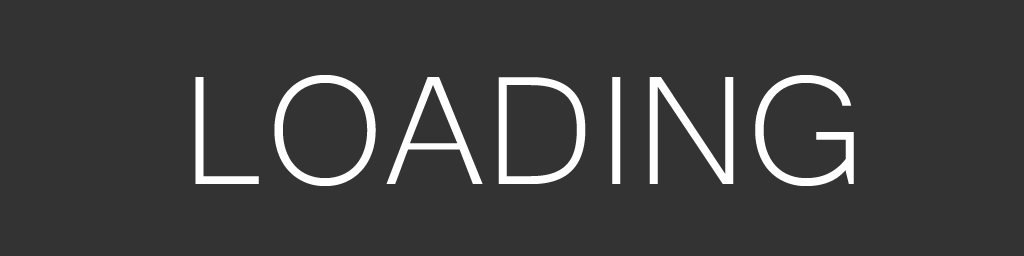
<style>
.page{position:relative;width:1024px;height:256px;background:#333333}
.page>*{position:absolute;margin:0}
.t1{font:200px "Microsoft-Yi-Baiti";color:#ffffff}
</style>
<div class="page">
<p class="t1" style="left:195px;top:75px;width:659px;height:111px">LOADING</p>
</div>
